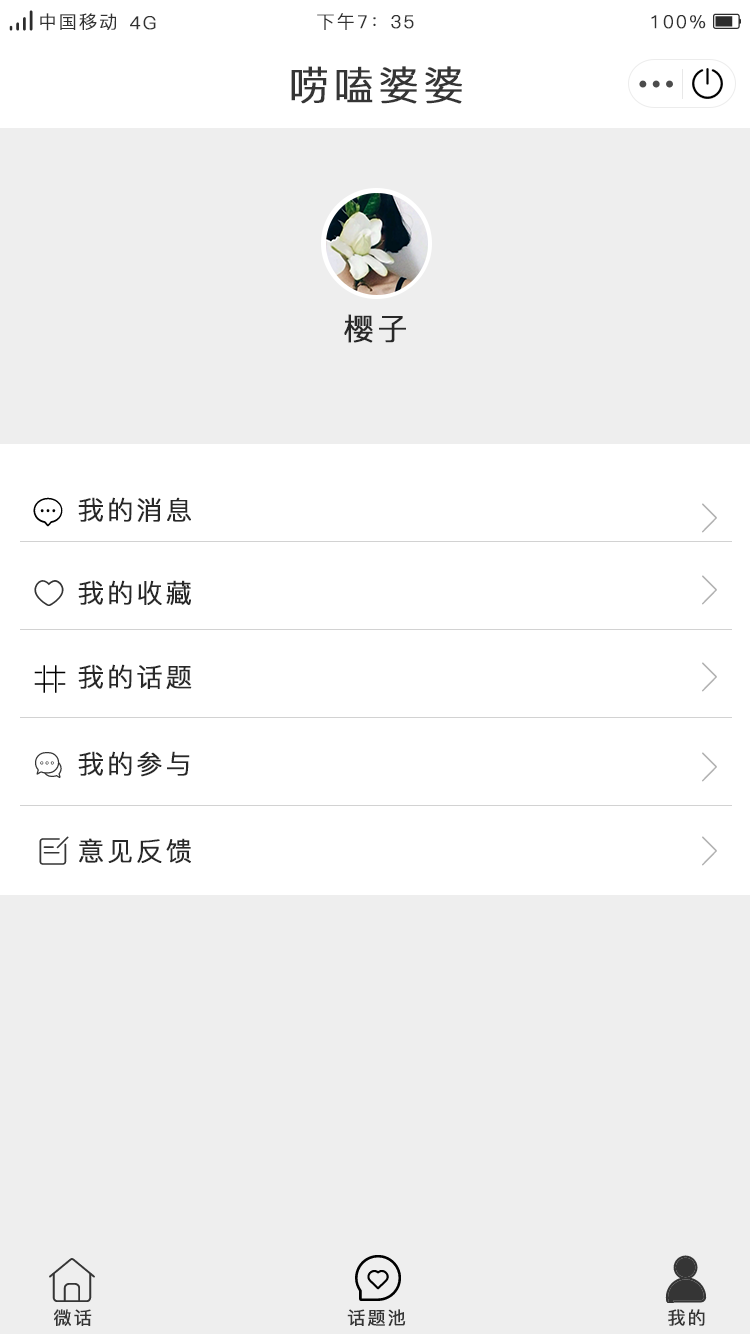
<style>
.page{position:relative;width:750px;height:1334px;background:#eeeeee}
.page>*{position:absolute;margin:0}
.t1{font:18px "PingFang-SC-Regular";letter-spacing:0.1em;color:#323232;font-weight:bold}
.t2{font:40px "PingFang-SC-Regular";letter-spacing:0.1em;color:#353535;font-weight:bold}
.t3{font:30px "PingFang-SC-Regular";letter-spacing:0.1em;color:#282828;font-weight:bold}
.t4{font:26px "PingFang-SC-Regular";letter-spacing:0.1em;color:#282828;font-weight:bold}
.t5{font:18px "PingFang-SC-Medium";letter-spacing:0.1em;color:#353535;font-weight:bold}
</style>
<div class="page">
<p class="t1" style="left:40px;top:13px;width:76px;height:18px">中国移动</p>
<p class="t1" style="left:130px;top:16px;width:26px;height:14px">4G</p>
<p class="t1" style="left:317px;top:13px;width:97px;height:17px">下午7：35</p>
<p class="t1" style="left:651px;top:15px;width:55px;height:14px">100%</p>
<p class="t2" style="left:291px;top:66px;width:171px;height:38px">唠嗑婆婆</p>
<p class="t3" style="left:344px;top:314px;width:62px;height:29px">樱子</p>
<p class="t4" style="left:78px;top:497px;width:113px;height:25px">我的消息</p>
<p class="t4" style="left:78px;top:580px;width:113px;height:25px">我的收藏</p>
<p class="t4" style="left:78px;top:664px;width:114px;height:25px">我的话题</p>
<p class="t4" style="left:78px;top:751px;width:112px;height:26px">我的参与</p>
<p class="t4" style="left:79px;top:838px;width:112px;height:26px">意见反馈</p>
<p class="t5" style="left:54px;top:1309px;width:38px;height:17px">微话</p>
<p class="t5" style="left:347px;top:1309px;width:59px;height:17px">话题池</p>
<p class="t5" style="left:668px;top:1309px;width:37px;height:17px">我的</p>
</div>
